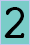
<style>
.page{position:relative;width:30px;height:45px;background:#7accc8}
.page>*{position:absolute;margin:0}
.t1{font:48px "Courier";color:#000000}
</style>
<div class="page">
<p class="t1" style="left:4px;top:7px;width:21px;height:31px">2</p>
</div>
